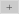
<style>
.page{position:relative;width:19px;height:14px;background:#cbcbcb}
.page>*{position:absolute;margin:0}
.t1{font:12px "Aparajita";scale:1.04 1}
</style>
<div class="page">
<p class="t1" style="left:6px;top:4px;width:6px;height:6px">+</p>
</div>
